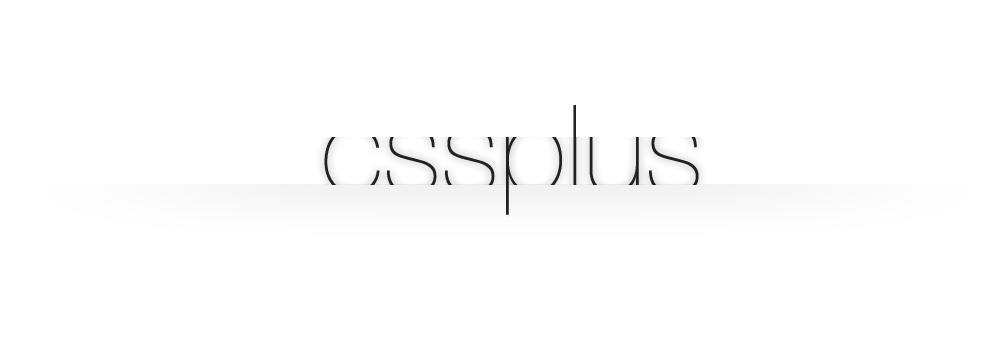
<style>
.page{position:relative;width:1000px;height:341px;background:#ffffff}
.page>*{position:absolute;margin:0}
.t1{font:125.4px "HelveticaNeue-UltraLight"}
</style>
<div class="page">
<p class="t1" style="left:324px;top:103px;width:375px;height:112px">cssplus</p>
</div>
